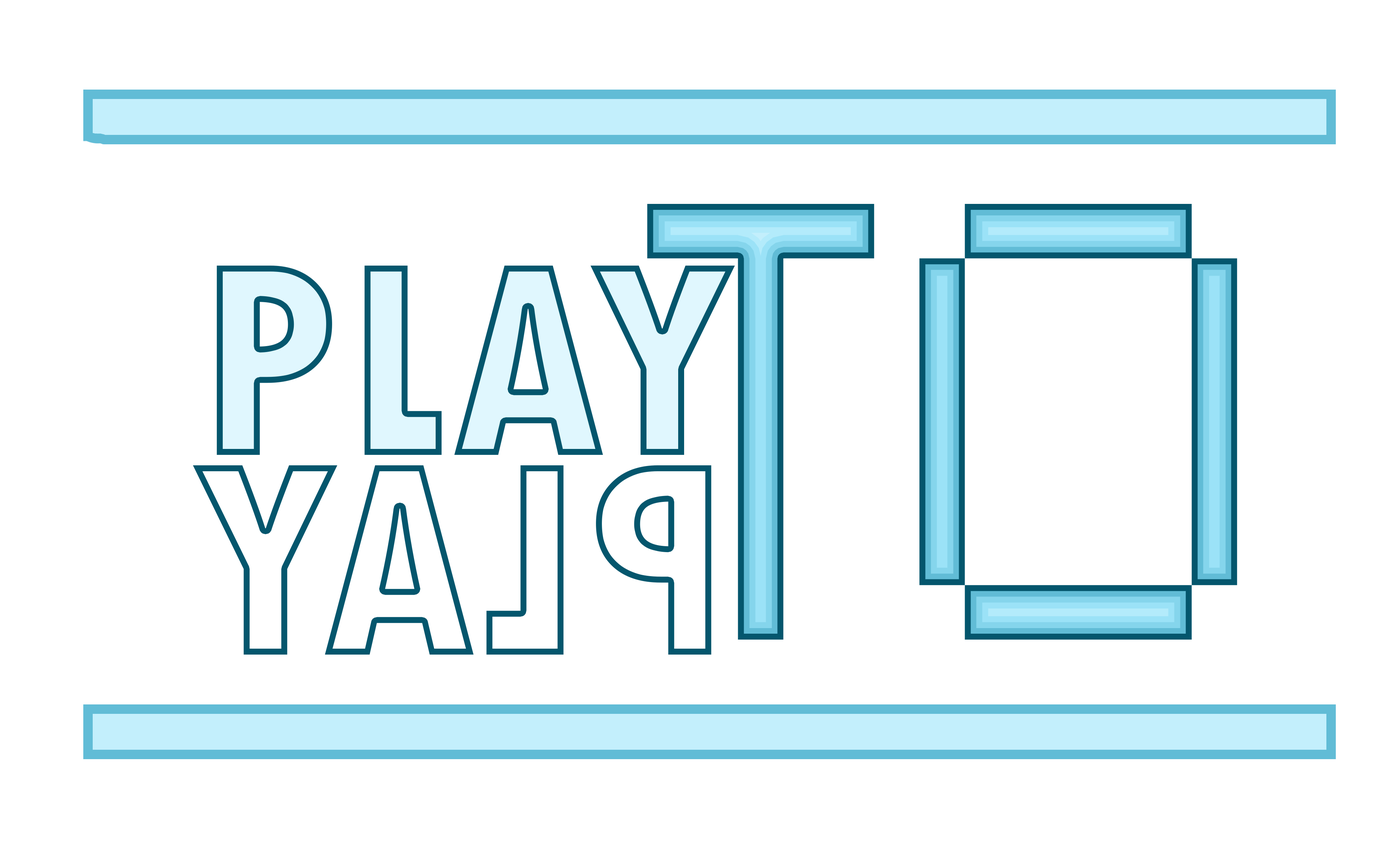
<style>
.page{position:relative;width:1394px;height:855px;background:#ffffff}
.page>*{position:absolute;margin:0}
.t1{font:581px "Small Fonts"}
.t2{font:290.5px "TwCenMT-CondensedExtraBold"}
</style>
<div class="page">
<p class="t1" style="left:647px;top:204px;width:591px;height:436px">TO</p>
<p class="t2" style="left:217px;top:266px;width:518px;height:189px">PLAY</p>
<p class="t2" style="left:193px;top:465px;width:519px;height:190px;rotate:180deg">PLAY</p>
</div>
